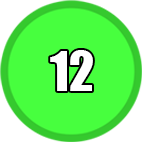
<style>
.page{position:relative;width:142px;height:142px;background:#47ff3e}
.page>*{position:absolute;margin:0}
.t1{font:50px "Impact";color:#ffffff}
</style>
<div class="page">
<p class="t1" style="left:50px;top:50px;width:43px;height:41px">12</p>
</div>
